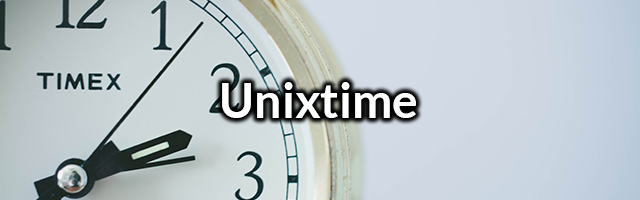
<style>
.page{position:relative;width:640px;height:200px}
.page>*{position:absolute;margin:0}
.t1{font:48px "Lato-Bold";color:#ffffff}
</style>
<div class="page">
<p class="t1" style="left:222px;top:82px;width:194px;height:36px">Unixtime</p>
</div>
